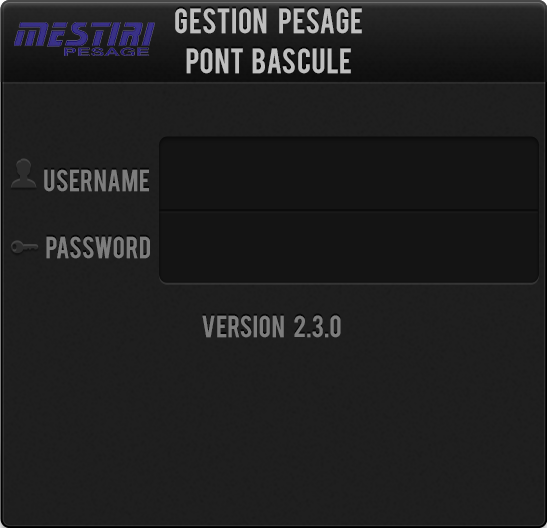
<style>
.page{position:relative;width:547px;height:528px;background:#1f1f1f}
.page>*{position:absolute;margin:0}
.t1{font:27.3px/40.1px "Bebas";color:#bfbfbf}
.t2{font:23.7px "Bebas";color:#7d7d7d}
</style>
<div class="page">
<p class="t1" style="left:175px;top:8px;width:187px;height:66px;text-align:center">Gestion    Pesage<br>pont   bascule</p>
<p class="t2" style="left:44px;top:169px;width:105px;height:23px">username</p>
<p class="t2" style="left:46px;top:236px;width:104px;height:23px">password</p>
<p class="t2" style="left:202px;top:315px;width:139px;height:23px">version    2.3.0</p>
</div>
